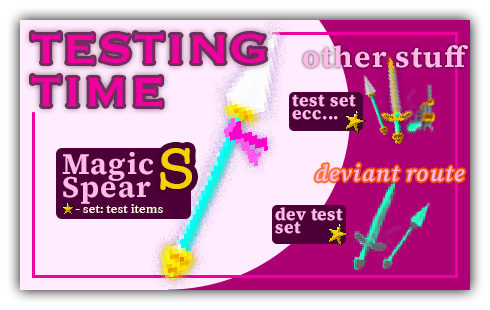
<style>
.page{position:relative;width:490px;height:310px;background:#ffecfe}
.page>*{position:absolute;margin:0}
.t1{font:64.2px/42.8px "Copperplate";color:#f0009f}
.t2{font:29.9px "SourceSerif4Roman_669.000wght_14.000opsz";letter-spacing:0.04em;color:#ffbae8}
.t3{font:17.3px/13.2px "SourceSerif4Roman_669.000wght_14.000opsz";letter-spacing:0.04em;color:#ffbae8}
.t4{font:76.7px "AmericanTypewriter";letter-spacing:-0.08em;color:#f6d000}
.t5{font:29.9px/22.8px "SourceSerif4Roman_669.000wght_14.000opsz";letter-spacing:0.04em;color:#ffbae8}
.t6{font:23.1px "SourceSerif4Italic-SmTextSemiboldItalic";letter-spacing:0.04em;color:#ffbae8}
.t7{font:14.2px "Athelas-Regular";color:#ffffdf}
.t8{font:17.3px/13.2px "SourceSerif4Roman_669.000wght_14.000opsz";letter-spacing:0.02em;color:#ffbae8}
</style>
<div class="page">
<p class="t1" style="left:32px;top:33px;width:234px;height:74px">testing<br>time</p>
<p class="t2" style="left:303px;top:45px;width:165px;height:23px">other stuff</p>
<p class="t3" style="left:292px;top:94px;width:64px;height:26px">test set<br>ecc...</p>
<p class="t4" style="left:160px;top:148px;width:32px;height:42px">s</p>
<p class="t5" style="left:62px;top:151px;width:91px;height:53px">Magic<br>Spear</p>
<p class="t6" style="left:315px;top:163px;width:150px;height:19px">deviant route</p>
<p class="t7" style="left:75px;top:204px;width:88px;height:9px">- set: test items</p>
<p class="t8" style="left:275px;top:207px;width:68px;height:27px">dev test<br>set</p>
</div>
